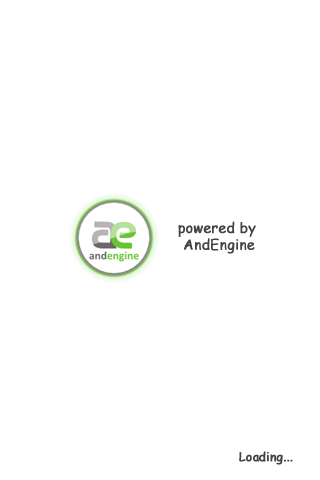
<style>
.page{position:relative;width:320px;height:480px;background:#ffffff}
.page>*{position:absolute;margin:0}
.t1{font:14px "ComicSansMS";color:#434343;font-weight:bold}
.t2{font:12px "ComicSansMS";color:#434343;font-weight:bold}
</style>
<div class="page">
<p class="t1" style="left:178px;top:221px;width:78px;height:33px;text-align:center">powered by <br>AndEngine</p>
<p class="t2" style="left:239px;top:451px;width:54px;height:14px">Loading...</p>
</div>
